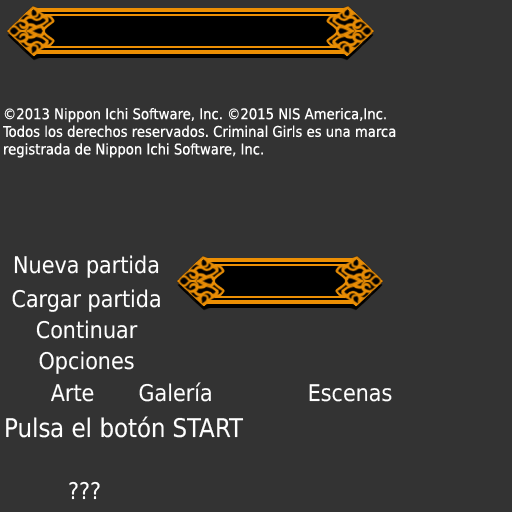
<style>
.page{position:relative;width:512px;height:512px;background:#333333}
.page>*{position:absolute;margin:0}
.t1{font:14.7px "DejaVuSansCondensed";color:#ffffff}
.t2{font:23px "DejaVuSansCondensed";color:#ffffff}
.t3{font:25.8px "DejaVuSansCondensed";color:#ffffff}
</style>
<div class="page">
<p class="t1" style="left:3px;top:108px;width:393px;height:50px">©2013 Nippon Ichi Software, Inc. ©2015 NIS America,Inc.<br>Todos los derechos reservados. Criminal Girls es una marca<br>registrada de Nippon Ichi Software, Inc.</p>
<p class="t2" style="left:14px;top:255px;width:145px;height:23px">Nueva partida</p>
<p class="t2" style="left:12px;top:289px;width:148px;height:23px">Cargar partida</p>
<p class="t2" style="left:36px;top:320px;width:102px;height:19px">Continuar</p>
<p class="t2" style="left:39px;top:351px;width:95px;height:23px">Opciones</p>
<p class="t2" style="left:51px;top:384px;width:43px;height:18px">Arte</p>
<p class="t2" style="left:139px;top:382px;width:72px;height:20px">Galería</p>
<p class="t2" style="left:309px;top:384px;width:83px;height:18px">Escenas</p>
<p class="t3" style="left:6px;top:416px;width:238px;height:22px">Pulsa el botón START</p>
<p class="t2" style="left:69px;top:481px;width:31px;height:19px">???</p>
</div>
